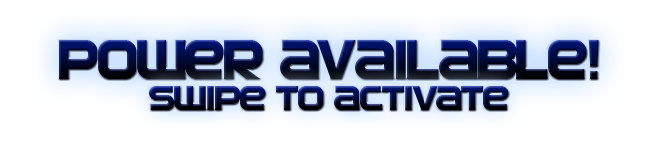
<style>
.page{position:relative;width:655px;height:155px;background:#ffffff}
.page>*{position:absolute;margin:0}
.t1{font:57.6px "SFAutomaton"}
.t2{font:37.4px "SFAutomaton"}
</style>
<div class="page">
<p class="t1" style="left:59px;top:40px;width:540px;height:39px">Power Available!</p>
<p class="t2" style="left:149px;top:86px;width:360px;height:24px">Swipe to activate</p>
</div>
